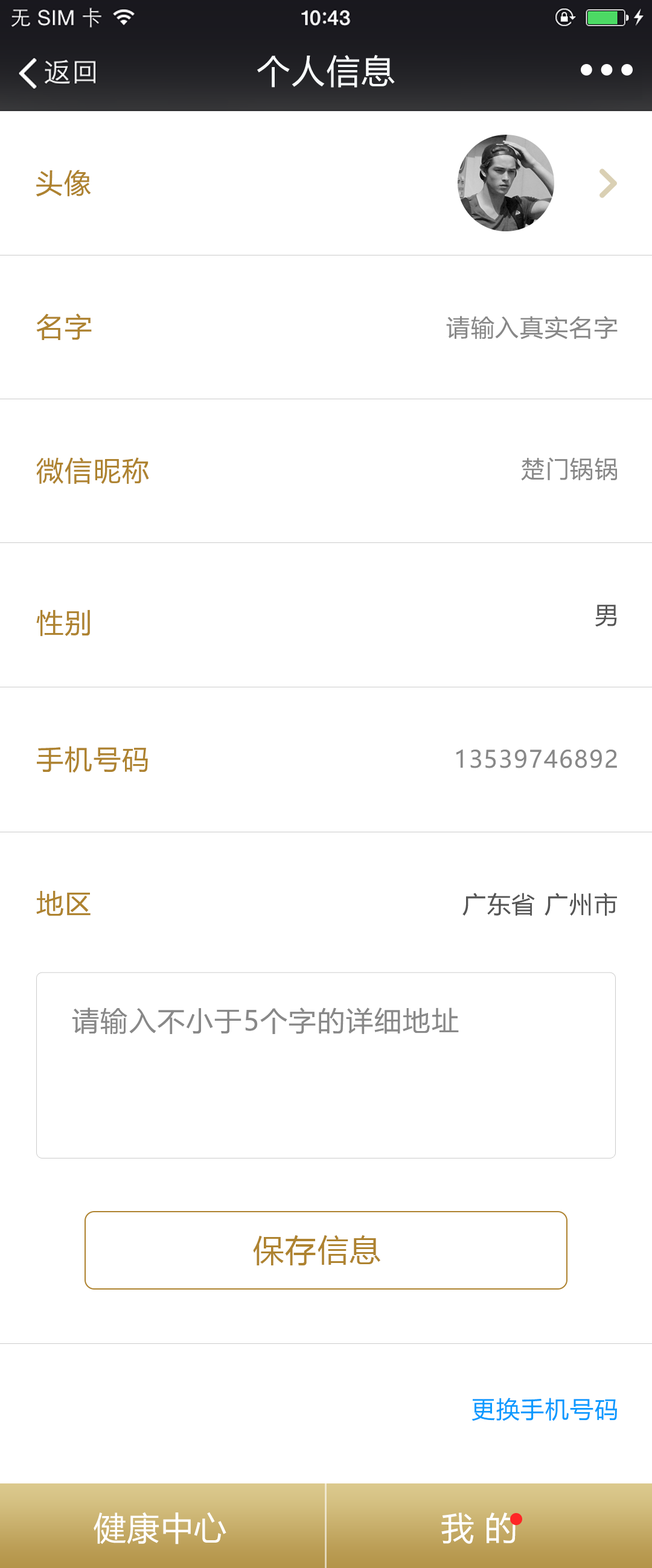
<style>
.page{position:relative;width:652px;height:1568px;background:#ffffff}
.page>*{position:absolute;margin:0}
.t1{font:33.2px "MicrosoftYaHei";letter-spacing:0.05em;color:#f8fbfc}
.t2{font:27.2px "MicrosoftYaHei";letter-spacing:0.05em;color:#ae8330}
.t3{font:23.6px "MicrosoftYaHei";letter-spacing:0.05em;color:#888888}
.t4{font:23.6px "MicrosoftYaHei";letter-spacing:0.05em;color:#555555}
.t5{font:27.2px "MicrosoftYaHei";letter-spacing:0.05em;color:#888888}
.t6{font:30.8px "MicrosoftYaHei";letter-spacing:0.05em;color:#ae8330}
.t7{font:23.6px "MicrosoftYaHei";letter-spacing:0.05em;color:#0a9aff}
.t8{font:32.6px "MicrosoftYaHei";letter-spacing:0.025em;color:#ffffff}
</style>
<div class="page">
<p class="t1" style="left:257px;top:55px;width:138px;height:33px">个人信息</p>
<p class="t2" style="left:36px;top:170px;width:55px;height:27px">头像</p>
<p class="t2" style="left:36px;top:313px;width:56px;height:27px">名字</p>
<p class="t3" style="left:446px;top:316px;width:172px;height:23px">请输入真实名字</p>
<p class="t2" style="left:36px;top:457px;width:113px;height:27px">微信昵称</p>
<p class="t3" style="left:521px;top:457px;width:96px;height:24px">楚门锅锅</p>
<p class="t4" style="left:596px;top:605px;width:21px;height:22px">男</p>
<p class="t2" style="left:36px;top:609px;width:54px;height:28px">性别</p>
<p class="t2" style="left:37px;top:746px;width:111px;height:27px">手机号码</p>
<p class="t3" style="left:457px;top:749px;width:160px;height:19px">13539746892</p>
<p class="t2" style="left:36px;top:890px;width:55px;height:26px">地区</p>
<p class="t4" style="left:463px;top:893px;width:154px;height:23px">广东省 广州市</p>
<p class="t5" style="left:72px;top:1007px;width:387px;height:27px">请输入不小于5个字的详细地址</p>
<p class="t6" style="left:253px;top:1235px;width:128px;height:30px">保存信息</p>
<p class="t7" style="left:472px;top:1398px;width:145px;height:23px">更换手机号码</p>
<p class="t8" style="left:94px;top:1512px;width:133px;height:32px">健康中心</p>
<p class="t8" style="left:442px;top:1512px;width:74px;height:32px">我 的</p>
</div>
